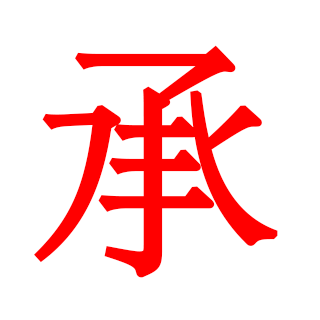
<style>
.page{position:relative;width:320px;height:320px;background:#ffffff}
.page>*{position:absolute;margin:0}
.t1{font:250px "AdobeSongStd-Light";letter-spacing:0.2em;color:#ff0000;font-weight:bold}
</style>
<div class="page">
<p class="t1" style="left:34px;top:45px;width:244px;height:233px">承</p>
</div>
